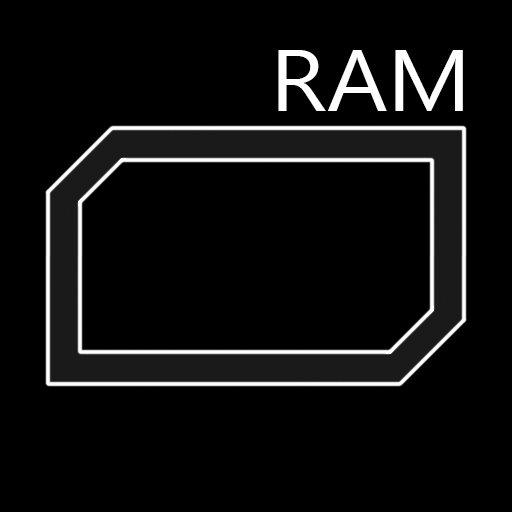
<style>
.page{position:relative;width:512px;height:512px;background:#000000}
.page>*{position:absolute;margin:0}
.t1{font:87.4px "Gadugi";color:#ffffff;scale:1.08 1}
</style>
<div class="page">
<p class="t1" style="left:278px;top:50px;width:185px;height:61px">RAM</p>
</div>
